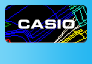
<style>
.page{position:relative;width:92px;height:64px;background:#000000}
.page>*{position:absolute;margin:0}
.t1{font:13.2px "EurostileExtended-Black";color:#ffffff}
</style>
<div class="page">
<p class="t1" style="left:18px;top:19px;width:57px;height:10px">CASIO</p>
</div>
